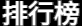
<style>
.page{position:relative;width:82px;height:26px;background:#000000}
.page>*{position:absolute;margin:0}
.t1{font:26px "WebPSD-18463539-0-Regular";color:#ffffff;font-weight:bold}
</style>
<div class="page">
<p class="t1" style="left:0px;top:0px;width:82px;height:26px">排行榜</p>
</div>
